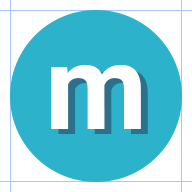
<style>
.page{position:relative;width:192px;height:192px;background:#2cb2ca}
.page>*{position:absolute;margin:0}
.t1{font:118.2px "Roboto-Bold";letter-spacing:0.04em;color:#ffffff}
</style>
<div class="page">
<p class="t1" style="left:51px;top:65px;width:90px;height:64px">m</p>
</div>
